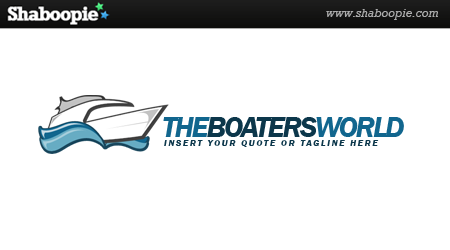
<style>
.page{position:relative;width:450px;height:250px;background:#ffffff}
.page>*{position:absolute;margin:0}
.t1{font:30px "FranklinGothic-DemiItalic";letter-spacing:-0.075em;color:#0c374b;text-transform:uppercase}
.t2{font:30px "FranklinGothic-DemiItalic";letter-spacing:-0.075em;color:#11668e;text-transform:uppercase}
.t3{font:9px "FranklinGothic-DemiItalic";letter-spacing:0.2em;color:#0c374b;text-transform:uppercase}
</style>
<div class="page">
<p class="t1" style="left:163px;top:117px;width:241px;height:20px"><span class="t2">THE</span>boaters<span class="t2">world</span></p>
<p class="t3" style="left:164px;top:140px;width:215px;height:7px">INSERT YOUR QUOTE OR TAGLINE HERE</p>
</div>
